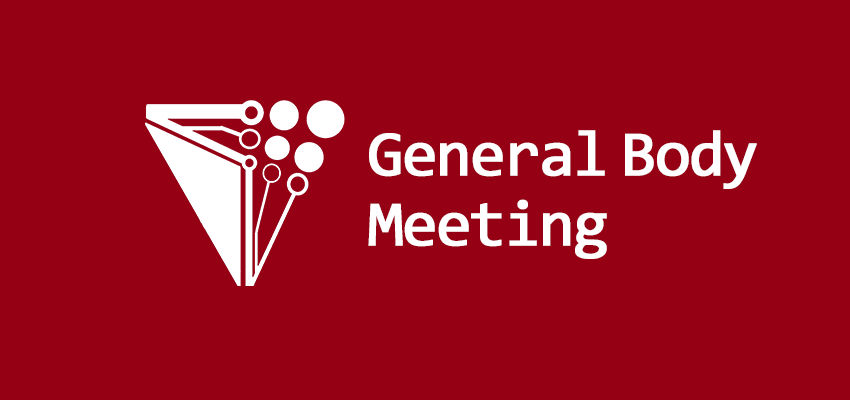
<style>
.page{position:relative;width:850px;height:400px;background:#960014}
.page>*{position:absolute;margin:0}
.t1{font:64.9px/70.3px "Consolas";letter-spacing:-0.05em;color:#ffffff;font-weight:bold}
</style>
<div class="page">
<p class="t1" style="left:368px;top:130px;width:389px;height:129px">General Body<br>Meeting</p>
</div>
